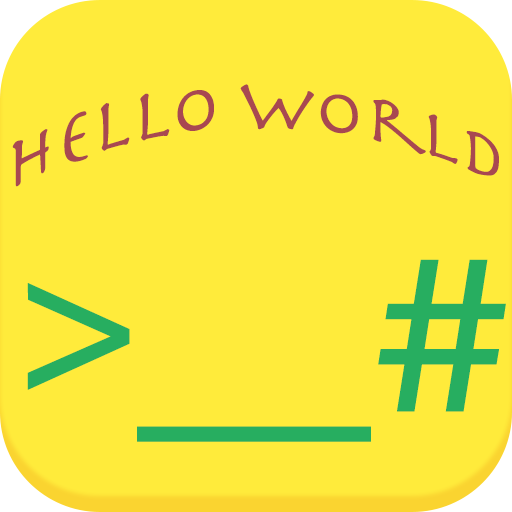
<style>
.page{position:relative;width:512px;height:512px;background:#ffeb3b}
.page>*{position:absolute;margin:0}
.t1{font:71px "Herculanum";color:#a84851;scale:1.03 1}
.t2{font:227px "AmericanTypewriter";color:#27ae60;scale:1.03 1}
</style>
<div class="page">
<p class="t1" style="left:12px;top:84px;width:487px;height:103px">Hello World</p>
<p class="t2" style="left:27px;top:259px;width:479px;height:183px">&gt;__#</p>
</div>
